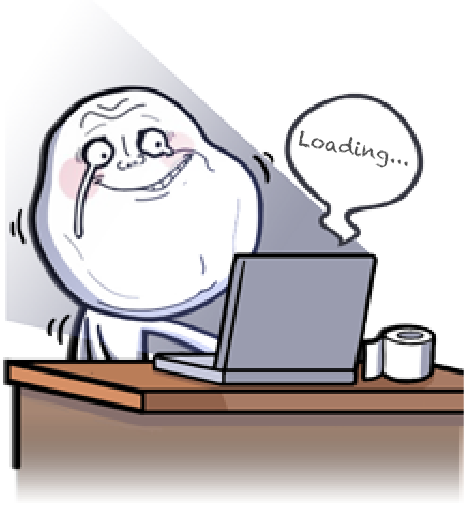
<style>
.page{position:relative;width:476px;height:508px;background:#ffffff}
.page>*{position:absolute;margin:0}
.t1{font:20px "Chalkduster";color:#525252}
</style>
<div class="page">
<p class="t1" style="left:298px;top:130px;width:110px;height:38px;rotate:10deg">Loading...</p>
</div>
